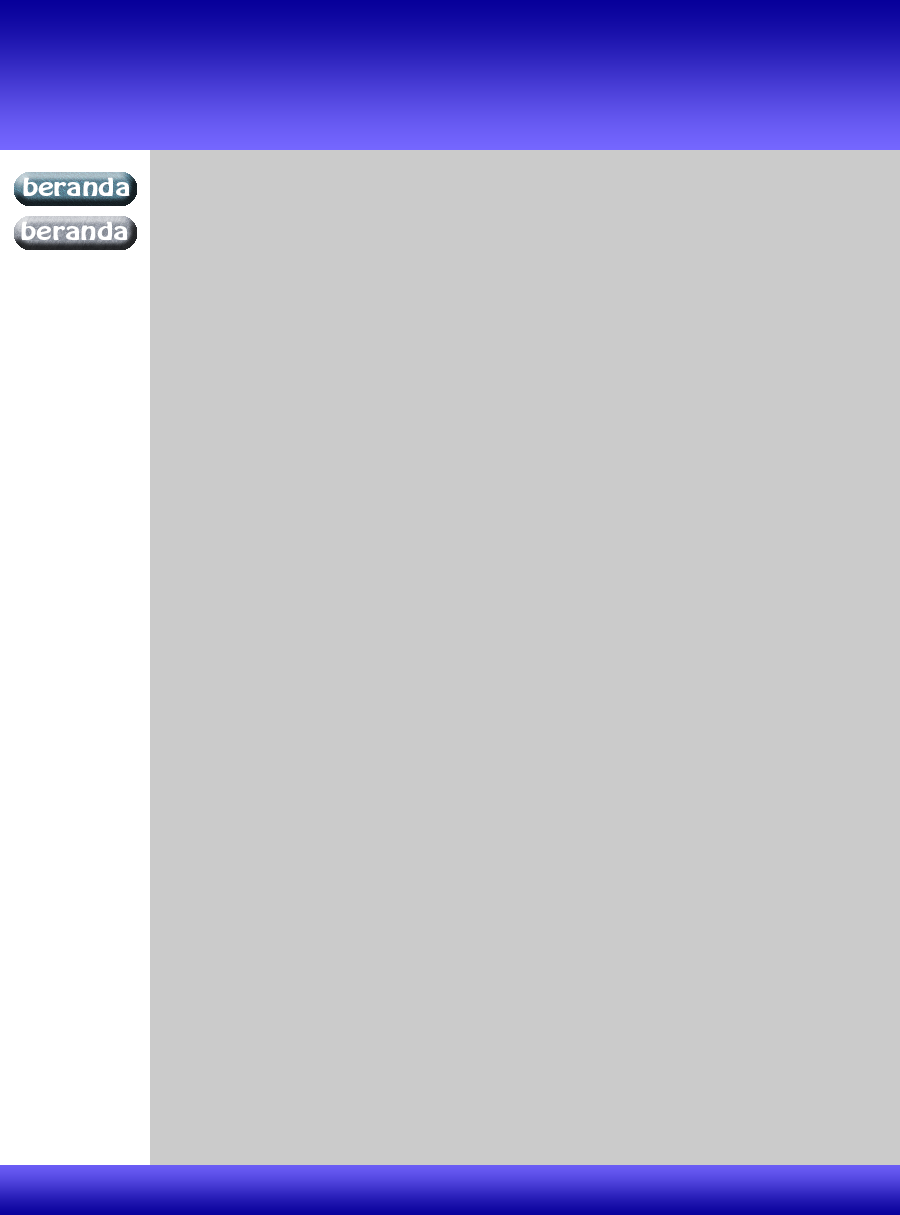
<style>
.page{position:relative;width:900px;height:1215px;background:#cbcbcb}
.page>*{position:absolute;margin:0}
.t1{font:21.4px "HoboStd";color:#ffffff;scale:1.4 1}
</style>
<div class="page">
<p class="t1" style="left:23px;top:177px;width:107px;height:19px">beranda</p>
<p class="t1" style="left:21px;top:221px;width:107px;height:19px">beranda</p>
</div>
